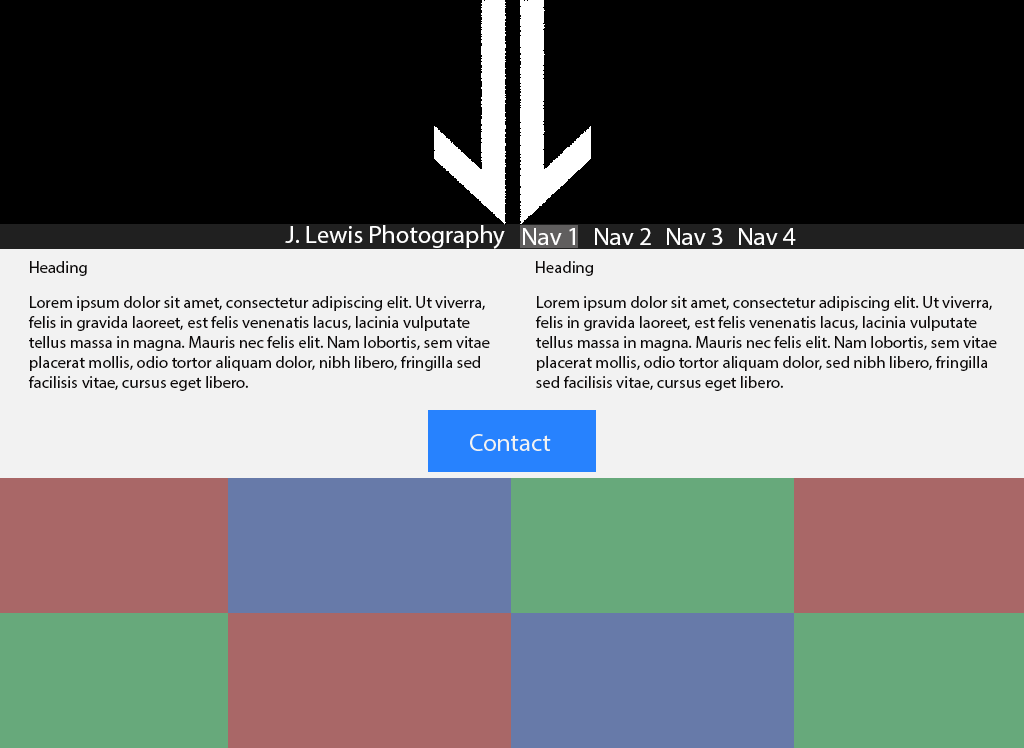
<style>
.page{position:relative;width:1024px;height:748px;background:#f2f2f2}
.page>*{position:absolute;margin:0}
.t1{font:25px "MyriadPro-Regular";color:#ffffff}
.t2{font:16.7px "MyriadPro-Regular";color:#0e0b0b}
</style>
<div class="page">
<p class="t1" style="left:285px;top:225px;width:220px;height:24px">J. Lewis Photography</p>
<p class="t1" style="left:523px;top:228px;width:273px;height:17px">Nav 1 Nav 2 Nav 3 Nav 4</p>
<p class="t2" style="left:30px;top:261px;width:57px;height:15px">Heading</p>
<p class="t2" style="left:536px;top:261px;width:57px;height:15px">Heading</p>
<p class="t2" style="left:28px;top:296px;width:462px;height:95px">Lorem ipsum dolor sit amet, consectetur adipiscing elit. Ut viverra, felis in gravida laoreet, est felis venenatis lacus, lacinia vulputate tellus massa in magna. Mauris nec felis elit. Nam lobortis, sem vitae placerat mollis, odio tortor aliquam dolor, nibh libero, fringilla sed facilisis vitae, cursus eget libero.</p>
<p class="t2" style="left:535px;top:296px;width:462px;height:95px">Lorem ipsum dolor sit amet, consectetur adipiscing elit. Ut viverra, felis in gravida laoreet, est felis venenatis lacus, lacinia vulputate tellus massa in magna. Mauris nec felis elit. Nam lobortis, sem vitae placerat mollis, odio tortor aliquam dolor, sed nibh libero, fringilla sed facilisis vitae, cursus eget libero.</p>
</div>
